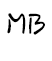
<style>
.page{position:relative;width:52px;height:61px;background:#ffffff}
.page>*{position:absolute;margin:0}
.t1{font:29px "Rosemary";color:#000000}
</style>
<div class="page">
<p class="t1" style="left:7px;top:13px;width:38px;height:22px">MB</p>
</div>
